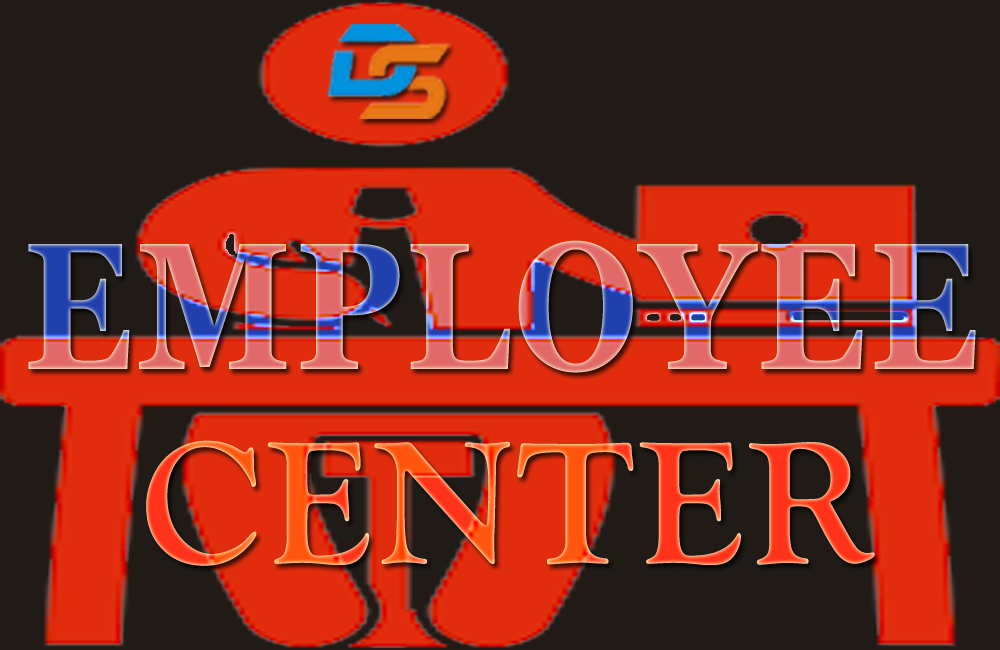
<style>
.page{position:relative;width:1000px;height:650px;background:#201b17}
.page>*{position:absolute;margin:0}
.t1{font:180px "Georgia-Bold";letter-spacing:0.025em;scale:0.84 1}
.t2{font:180px "GoudyOldStyleT-Bold";letter-spacing:0.025em}
</style>
<div class="page">
<p class="t1" style="left:28px;top:240px;width:948px;height:133px">EMPLOYEE</p>
<p class="t2" style="left:146px;top:440px;width:729px;height:126px">CENTER</p>
</div>
